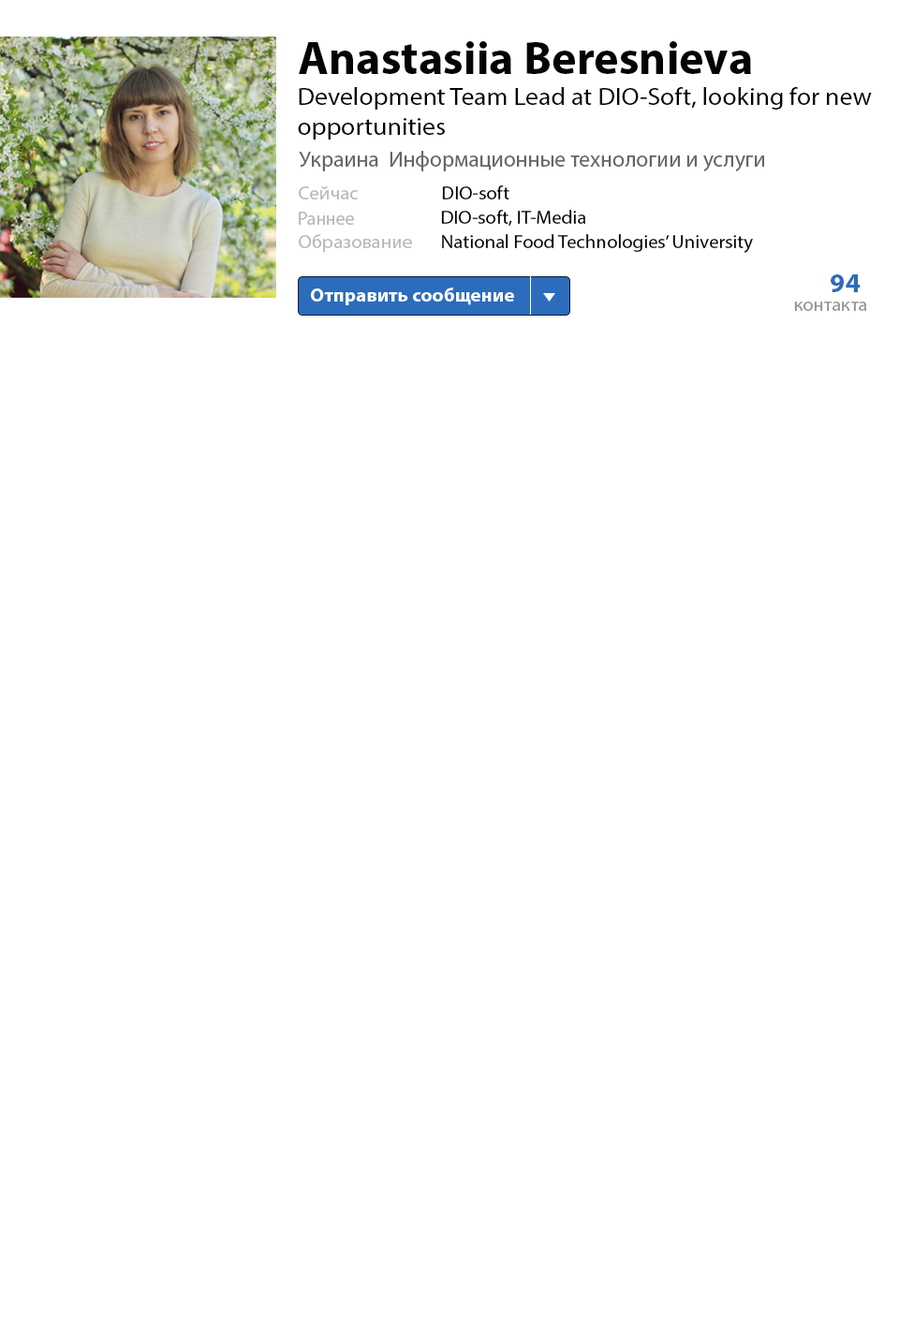
<style>
.page{position:relative;width:899px;height:1327px;background:#ffffff}
.page>*{position:absolute;margin:0}
.t1{font:11.2px "MyriadPro-Bold";color:#040404}
.t2{font:24.5px "MyriadPro-Regular";color:#040404;scale:1.06 1}
.t3{font:5.3px "MyriadPro-Regular";color:#676666}
.t4{font:19.5px "MyriadPro-Regular";color:#030303}
.t5{font:19.5px "MyriadPro-Regular";color:#b8b7b7}
.t6{font:19.5px "MyriadPro-Regular";color:#010101}
.t7{font:19.5px "MyriadPro-Regular";color:#b8b7b7;scale:0.95 1}
.t8{font:27.3px "MyriadPro-Bold";color:#2b6cbc}
.t9{font:19.5px "MyriadPro-Bold";color:#fefefe}
.t10{font:19.5px "MyriadPro-Regular";color:#969292}
</style>
<div class="page">
<p class="t1" style="left:299px;top:41px;width:452px;height:33px">Anastasiia Beresnieva</p>
<p class="t2" style="left:298px;top:87px;width:574px;height:53px">Development Team Lead at DIO-Soft, looking for new<br>opportunities</p>
<p class="t3" style="left:299px;top:151px;width:465px;height:20px">Украина  Информационные технологии и услуги</p>
<p class="t4" style="left:442px;top:185px;width:67px;height:14px">DIO-soft</p>
<p class="t5" style="left:299px;top:186px;width:59px;height:13px">Сейчас</p>
<p class="t6" style="left:441px;top:210px;width:145px;height:17px">DIO-soft, IT-Media</p>
<p class="t7" style="left:299px;top:212px;width:55px;height:13px">Раннее</p>
<p class="t5" style="left:299px;top:234px;width:113px;height:18px">Образование</p>
<p class="t6" style="left:442px;top:234px;width:311px;height:19px">National Food Technologies’ University</p>
<p class="t8" style="left:830px;top:274px;width:30px;height:18px">94</p>
<p class="t9" style="left:311px;top:287px;width:203px;height:18px">Отправить сообщение</p>
<p class="t10" style="left:794px;top:301px;width:73px;height:10px">контакта</p>
</div>
